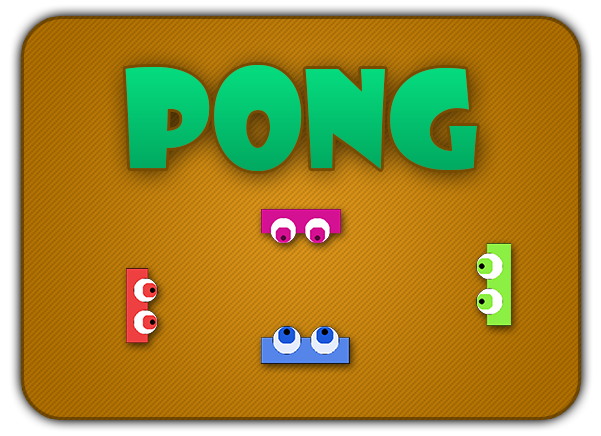
<style>
.page{position:relative;width:601px;height:436px}
.page>*{position:absolute;margin:0}
.t1{font:132.5px "ShowcardGothic-Reg";color:#03c571}
</style>
<div class="page">
<p class="t1" style="left:125px;top:65px;width:352px;height:106px">pong</p>
</div>
